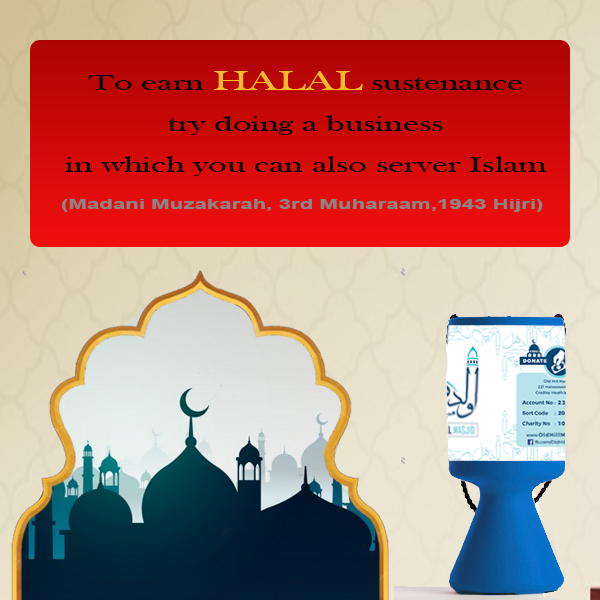
<style>
.page{position:relative;width:600px;height:600px}
.page>*{position:absolute;margin:0}
.t1{font:22.6px/41px "BaskOldFace";color:#000000;scale:1.58 1}
.t2{font:27.6px/41px "BaskOldFace";color:#fcba2b;scale:1.58 1}
.t3{font:14px "Arial-BoldMT";color:#878787;scale:1.59 1}
</style>
<div class="page">
<p class="t1" style="left:65px;top:71px;width:482px;height:105px;text-align:center">To earn <span class="t2">HALAL</span> sustenance<br> try doing a business <br>in which you can also server Islam</p>
<p class="t3" style="left:62px;top:199px;width:481px;height:13px">(Madani Muzakarah, 3rd Muharaam,1943 Hijri)</p>
</div>
